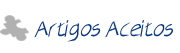
<style>
.page{position:relative;width:180px;height:53px;background:#ffffff}
.page>*{position:absolute;margin:0}
.t1{font:24px "AirCutLight";color:#0b3788}
</style>
<div class="page">
<p class="t1" style="left:34px;top:20px;width:139px;height:22px">Artigos Aceitos</p>
</div>
